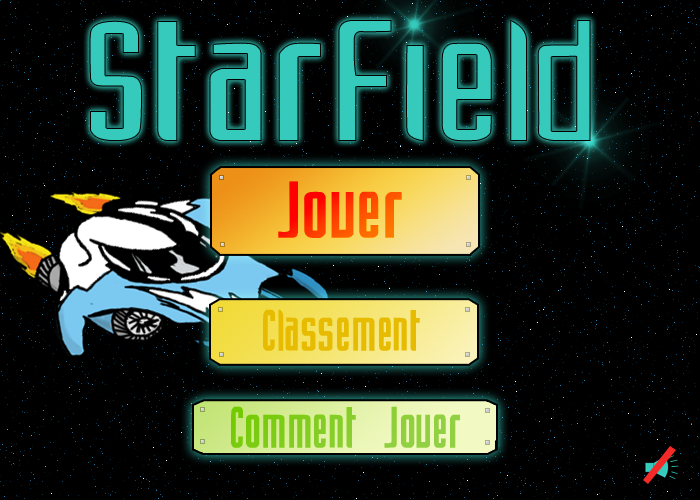
<style>
.page{position:relative;width:700px;height:500px;background:#000000}
.page>*{position:absolute;margin:0}
.t1{font:69.2px "XFiles";font-weight:bold;scale:1.19 1}
.t2{font:50px "XFiles";color:#e7bb00;font-weight:bold}
.t3{font:50px "XFiles";font-weight:bold}
</style>
<div class="page">
<p class="t1" style="left:278px;top:181px;width:124px;height:57px">Jouer</p>
<p class="t1" style="left:278px;top:181px;width:124px;height:57px">Jouer</p>
<p class="t2" style="left:263px;top:309px;width:157px;height:42px">Classement</p>
<p class="t3" style="left:231px;top:406px;width:229px;height:42px">Comment Jouer</p>
<p class="t3" style="left:231px;top:406px;width:229px;height:42px">Comment Jouer</p>
</div>
